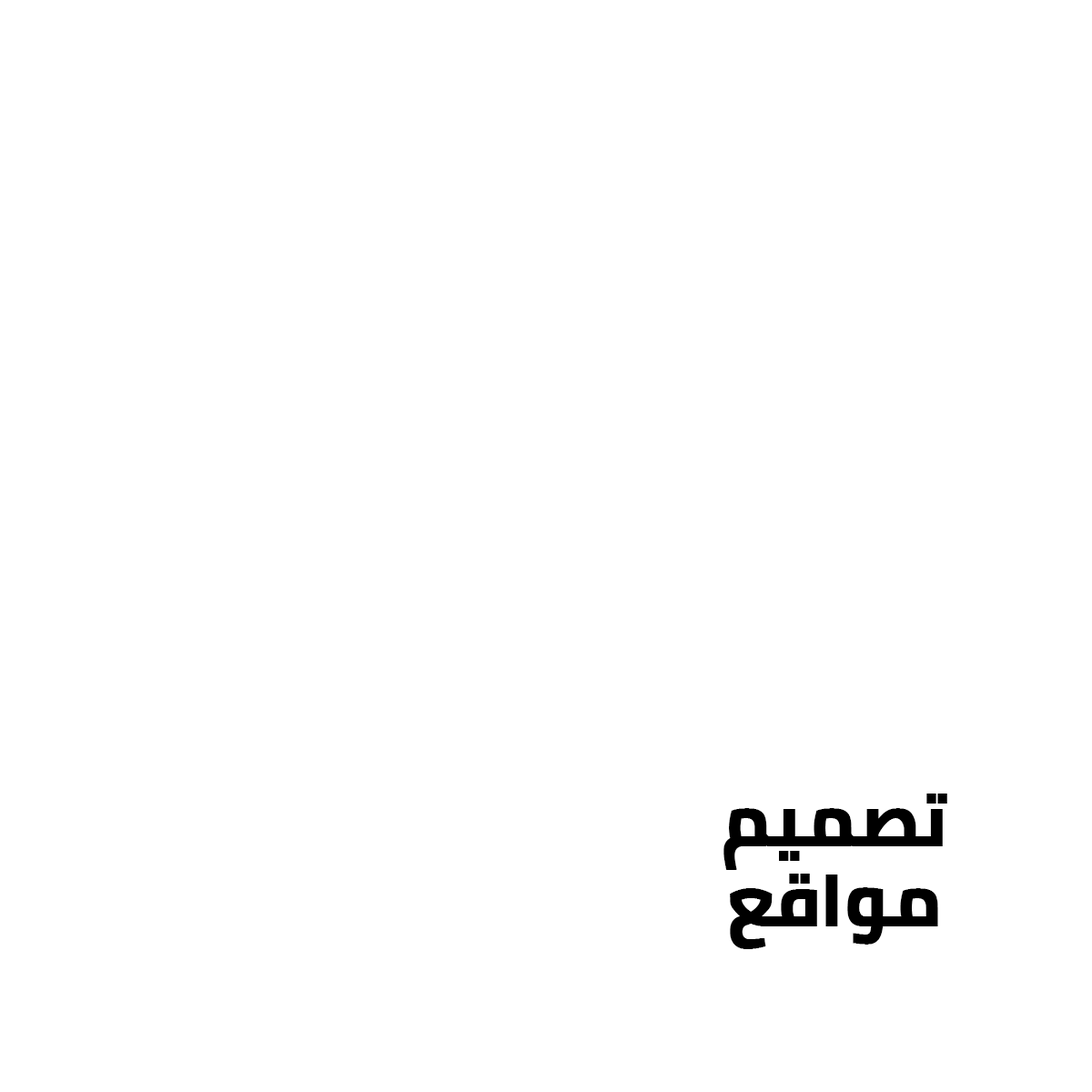
<style>
.page{position:relative;width:1092px;height:1092px;background:#ffffff}
.page>*{position:absolute;margin:0}
.t1{font:72.8px/80.3px "Cairo-Bold";color:#000000;font-weight:bold}
</style>
<div class="page">
<p class="t1" style="left:723px;top:794px;width:224px;height:155px;text-align:center">تصميم<br>مواقع</p>
</div>
